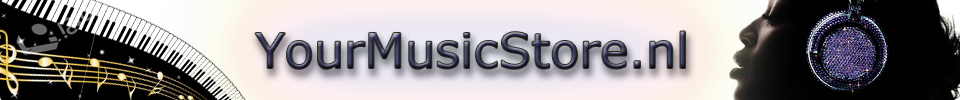
<style>
.page{position:relative;width:960px;height:100px}
.page>*{position:absolute;margin:0}
.t1{font:48px "Verdana"}
</style>
<div class="page">
<p class="t1" style="left:255px;top:31px;width:430px;height:38px">YourMusicStore.nl</p>
</div>
